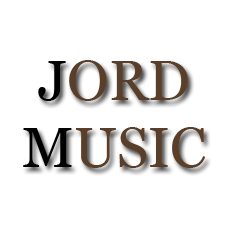
<style>
.page{position:relative;width:225px;height:225px;background:#ffffff}
.page>*{position:absolute;margin:0}
.t1{font:56px "Georgia";color:#593f29}
.t2{font:56px "Georgia";color:#000000}
</style>
<div class="page">
<p class="t1" style="left:23px;top:60px;width:183px;height:108px;text-align:center"><span class="t2">J</span>ORD<br><span class="t2">M</span>USIC</p>
</div>
